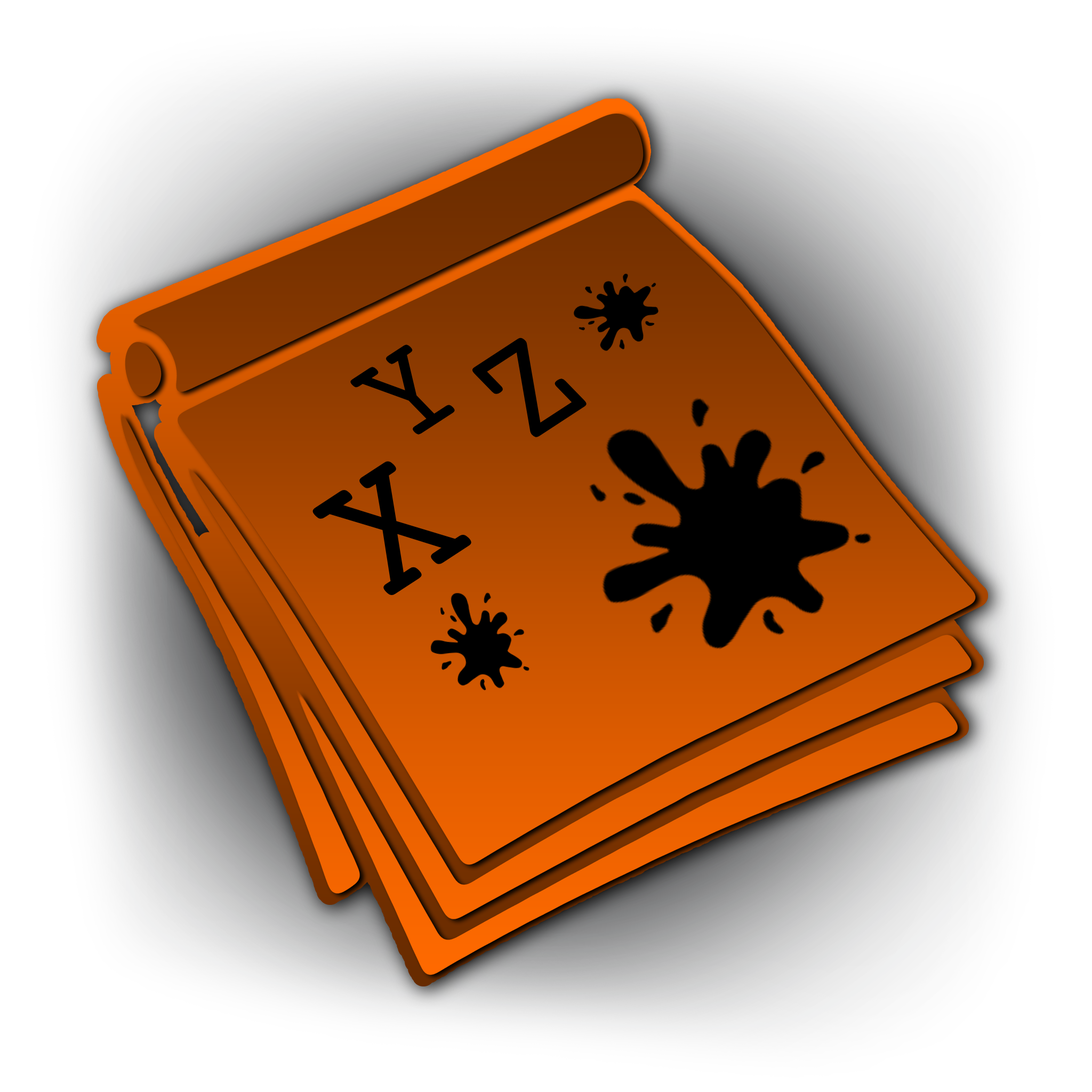
<style>
.page{position:relative;width:1092px;height:1092px}
.page>*{position:absolute;margin:0}
.t1{font:163.6px "CourierPrime-Regular";color:#000000;scale:0.88 1}
.t2{font:146px "CourierPrime-Regular";color:#000000;scale:0.88 1}
.t3{font:203.7px "CourierPrime-Regular";color:#000000;scale:0.88 1}
</style>
<div class="page">
<p class="t1" style="left:472px;top:338px;width:115px;height:99px;rotate:-33deg">Z</p>
<p class="t2" style="left:350px;top:344px;width:105px;height:91px;rotate:-33deg">Y</p>
<p class="t3" style="left:312px;top:461px;width:159px;height:134px;rotate:-33deg">X</p>
</div>
